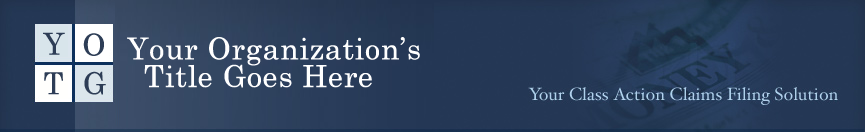
<style>
.page{position:relative;width:865px;height:132px;background:#243755}
.page>*{position:absolute;margin:0}
.t1{font:30px "CenturySchoolbook";color:#2d3d56;font-weight:bold}
.t2{font:30px "CenturySchoolbook";color:#ffffff;font-weight:bold}
</style>
<div class="page">
<p class="t1" style="left:43px;top:32px;width:22px;height:23px">Y</p>
<p class="t1" style="left:83px;top:33px;width:21px;height:23px">O</p>
<p class="t2" style="left:127px;top:37px;width:293px;height:29px">Your Organization’s</p>
<p class="t2" style="left:144px;top:64px;width:228px;height:24px">Title Goes Here</p>
<p class="t1" style="left:44px;top:72px;width:19px;height:23px">T</p>
<p class="t1" style="left:84px;top:71px;width:22px;height:24px">G</p>
</div>
